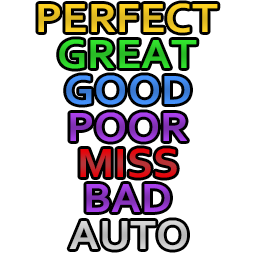
<style>
.page{position:relative;width:256px;height:256px;background:#ffffff}
.page>*{position:absolute;margin:0}
.t1{font:43px "Corbel-Bold";color:#ffd426;scale:1.05 1}
.t2{font:43px "Corbel-Bold";color:#2ed22a;scale:1.05 1}
.t3{font:43px "Corbel-Bold";color:#4087e9;scale:1.05 1}
.t4{font:43px "Corbel-Bold";scale:1.05 1}
.t5{font:43px "Corbel-Bold";color:#cacaca;scale:1.05 1}
</style>
<div class="page">
<p class="t1" style="left:38px;top:3px;width:180px;height:30px">PERFECT</p>
<p class="t2" style="left:59px;top:39px;width:138px;height:30px">GREAT</p>
<p class="t3" style="left:66px;top:75px;width:124px;height:30px">GOOD</p>
<p class="t4" style="left:70px;top:112px;width:117px;height:30px">POOR</p>
<p class="t4" style="left:80px;top:148px;width:97px;height:30px">MISS</p>
<p class="t4" style="left:86px;top:184px;width:84px;height:28px">BAD</p>
<p class="t5" style="left:69px;top:220px;width:118px;height:30px">AUTO</p>
</div>
